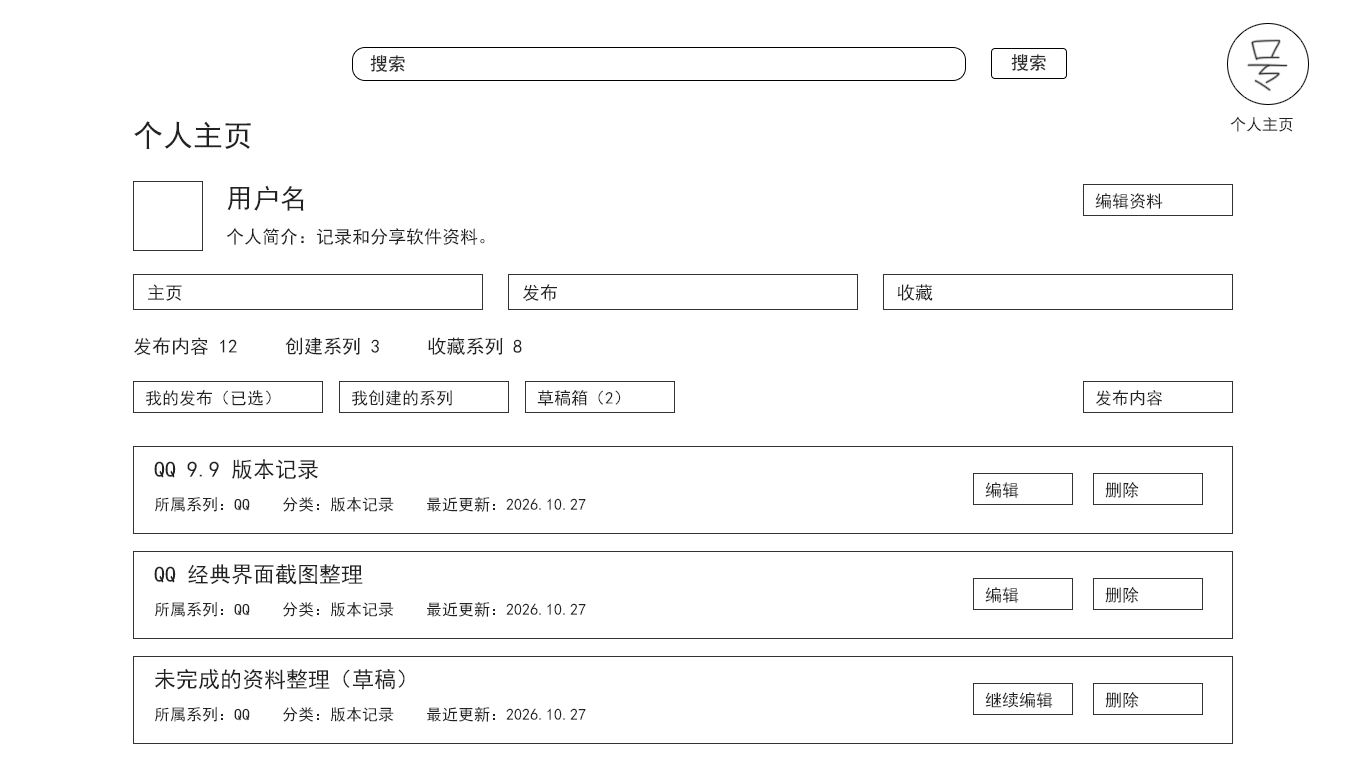
<style>
.page{position:relative;width:1366px;height:768px;background:#ffffff}
.page>*{position:absolute;margin:0}
.t1{font:18px "SimHei";color:#282828}
.t2{font:30px "SimHei";color:#222222}
.t3{font:16px "SimHei";color:#222222}
.t4{font:27px "SimHei";color:#222222}
.t5{font:17px "SimHei";color:#222222}
.t6{font:18px "SimHei";color:#222222}
.t7{font:19px "SimHei";color:#222222}
.t8{font:22px "SimHei";color:#222222}
</style>
<div class="page">
<p class="t1" style="left:1011px;top:54px;width:35px;height:17px">搜索</p>
<p class="t1" style="left:370px;top:55px;width:35px;height:17px">搜索</p>
<p class="t2" style="left:134px;top:121px;width:117px;height:28px">个人主页</p>
<p class="t3" style="left:1230px;top:116px;width:63px;height:16px">个人主页</p>
<p class="t4" style="left:227px;top:185px;width:77px;height:26px">用户名</p>
<p class="t5" style="left:1095px;top:193px;width:68px;height:16px">编辑资料</p>
<p class="t6" style="left:226px;top:228px;width:259px;height:17px">个人简介：记录和分享软件资料。</p>
<p class="t6" style="left:148px;top:284px;width:34px;height:17px">主页</p>
<p class="t6" style="left:523px;top:284px;width:34px;height:17px">发布</p>
<p class="t6" style="left:897px;top:284px;width:36px;height:17px">收藏</p>
<p class="t7" style="left:134px;top:337px;width:388px;height:18px">发布内容 12     创建系列 3     收藏系列 8</p>
<p class="t5" style="left:146px;top:390px;width:125px;height:16px">我的发布（已选）</p>
<p class="t5" style="left:352px;top:390px;width:100px;height:16px">我创建的系列</p>
<p class="t5" style="left:537px;top:390px;width:84px;height:16px">草稿箱（2）</p>
<p class="t5" style="left:1096px;top:390px;width:66px;height:16px">发布内容</p>
<p class="t8" style="left:154px;top:459px;width:164px;height:21px">QQ 9.9 版本记录</p>
<p class="t5" style="left:985px;top:482px;width:34px;height:16px">编辑</p>
<p class="t5" style="left:1105px;top:482px;width:34px;height:16px">删除</p>
<p class="t3" style="left:154px;top:496px;width:432px;height:16px">所属系列：QQ    分类：版本记录    最近更新：2026.10.27</p>
<p class="t8" style="left:154px;top:564px;width:209px;height:21px">QQ 经典界面截图整理</p>
<p class="t5" style="left:985px;top:587px;width:34px;height:16px">编辑</p>
<p class="t5" style="left:1105px;top:587px;width:34px;height:16px">删除</p>
<p class="t3" style="left:154px;top:601px;width:432px;height:16px">所属系列：QQ    分类：版本记录    最近更新：2026.10.27</p>
<p class="t8" style="left:155px;top:669px;width:250px;height:21px">未完成的资料整理（草稿）</p>
<p class="t5" style="left:985px;top:692px;width:68px;height:16px">继续编辑</p>
<p class="t5" style="left:1105px;top:692px;width:34px;height:16px">删除</p>
<p class="t3" style="left:154px;top:706px;width:432px;height:16px">所属系列：QQ    分类：版本记录    最近更新：2026.10.27</p>
</div>
